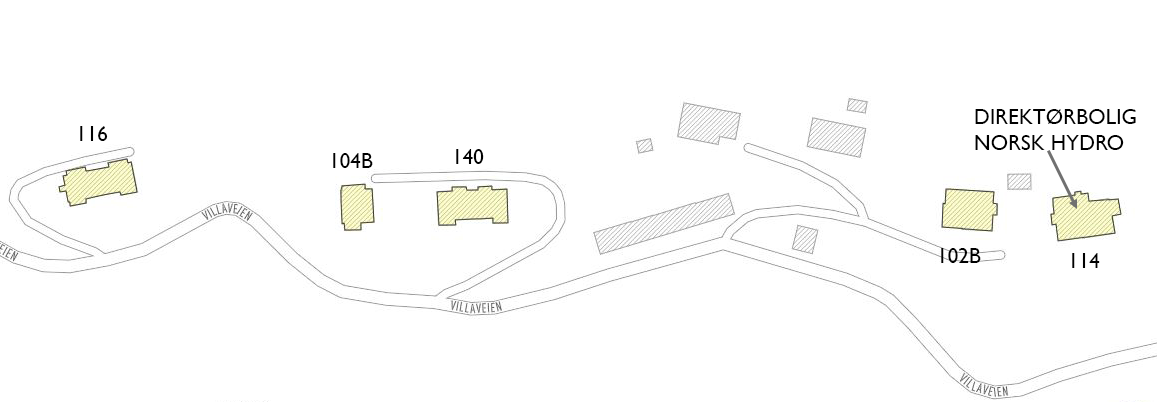
<style>
.page{position:relative;width:1157px;height:402px;background:#ffffff}
.page>*{position:absolute;margin:0}
.t1{font:21.3px "GillSansMT";color:#000000}
</style>
<div class="page">
<p class="t1" style="left:975px;top:109px;width:161px;height:41px">DIREKTØRBOLIG<br>NORSK HYDRO</p>
<p class="t1" style="left:80px;top:126px;width:28px;height:15px">116</p>
<p class="t1" style="left:456px;top:149px;width:28px;height:15px">140</p>
<p class="t1" style="left:333px;top:153px;width:40px;height:15px">104B</p>
<p class="t1" style="left:941px;top:248px;width:40px;height:15px">102B</p>
<p class="t1" style="left:1072px;top:253px;width:28px;height:15px">114</p>
</div>
